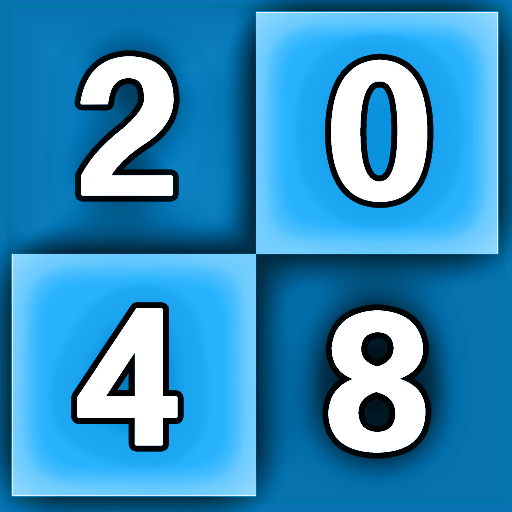
<style>
.page{position:relative;width:512px;height:512px}
.page>*{position:absolute;margin:0}
.t1{font:159.8px "FZZDHJW--GB1-0";color:#ffffff;font-weight:bold;scale:0.9 1}
</style>
<div class="page">
<p class="t1" style="left:80px;top:56px;width:94px;height:140px">2</p>
<p class="t1" style="left:331px;top:59px;width:97px;height:143px">0</p>
<p class="t1" style="left:77px;top:308px;width:101px;height:138px">4</p>
<p class="t1" style="left:328px;top:310px;width:98px;height:143px">8</p>
</div>
